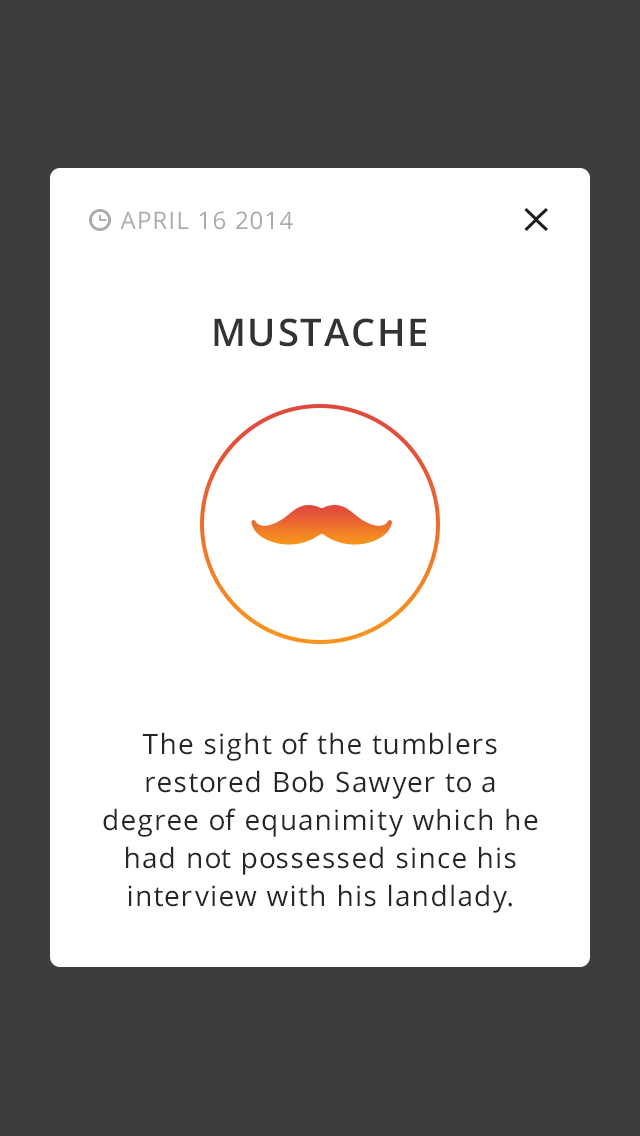
<style>
.page{position:relative;width:640px;height:1136px;background:#ffffff}
.page>*{position:absolute;margin:0}
.t1{font:24px "OpenSans";letter-spacing:0.05em;color:#aaaaaa;text-transform:uppercase}
.t2{font:38px "OpenSans-Semibold";letter-spacing:0.05em;color:#333333;text-transform:uppercase}
.t3{font:28px/38px "OpenSans";letter-spacing:0.025em;color:#262626}
</style>
<div class="page">
<p class="t1" style="left:120px;top:211px;width:173px;height:19px">april 16 2014</p>
<p class="t2" style="left:214px;top:318px;width:212px;height:29px">Mustache</p>
<p class="t3" style="left:103px;top:732px;width:435px;height:181px;text-align:center">The sight of the tumblers restored Bob Sawyer to a degree of equanimity which he had not possessed since his interview with his landlady.</p>
</div>
